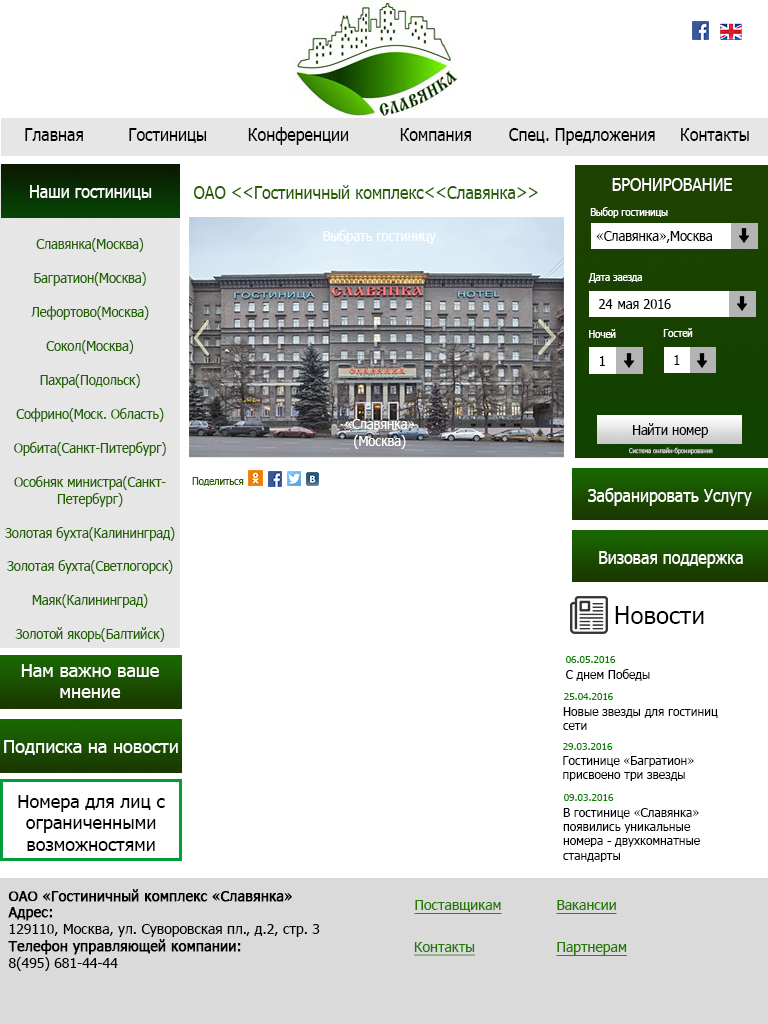
<style>
.page{position:relative;width:768px;height:1024px;background:#ffffff}
.page>*{position:absolute;margin:0}
.t1{font:17.7px "Tahoma";color:#000000;scale:0.9 1}
.t2{font:17.7px "Tahoma";color:#fefefe;scale:0.9 1}
.t3{font:17.7px "Tahoma";color:#266000;scale:0.9 1}
.t4{font:17.7px "Tahoma";color:#ffffff;scale:0.9 1}
.t5{font:10.6px "Tahoma";color:#ffffff;scale:0.9 1}
.t6{font:14.1px "Tahoma";color:#ffffff;scale:0.9 1}
.t7{font:14.1px "Tahoma";color:#000000;scale:0.9 1}
.t8{font:14.1px "Tahoma";color:#236301;scale:0.9 1}
.t9{font:6.5px "Tahoma";color:#c7c5c5;scale:0.9 1}
.t10{font:10.6px "Tahoma";color:#266000;scale:0.9 1}
.t11{font:24px "Tahoma";color:#000000}
.t12{font:18px "Tahoma";color:#ffffff}
.t13{font:10px "Tahoma";color:#0c8100}
.t14{font:12px "Tahoma";color:#000000}
.t15{font:18px "Tahoma";color:#000000}
.t16{font:14px "Tahoma";color:#000000}
.t17{font:14px "Tahoma";color:#000000;font-weight:bold}
.t18{font:14px "Tahoma";color:#227a00;text-decoration:underline}
</style>
<div class="page">
<p class="t1" style="left:25px;top:128px;width:58px;height:13px">Главная</p>
<p class="t1" style="left:129px;top:128px;width:78px;height:15px">Гостиницы</p>
<p class="t1" style="left:248px;top:127px;width:101px;height:18px">Конференции</p>
<p class="t1" style="left:400px;top:128px;width:71px;height:13px">Компания</p>
<p class="t1" style="left:509px;top:128px;width:146px;height:17px">Спец. Предложения</p>
<p class="t1" style="left:681px;top:128px;width:68px;height:13px">Контакты</p>
<p class="t2" style="left:30px;top:185px;width:122px;height:15px">Наши гостиницы</p>
<p class="t3" style="left:193px;top:185px;width:345px;height:14px">ОАО &lt;&lt;Гостиничный комплекс&lt;&lt;Славянка&gt;&gt;</p>
<p class="t4" style="left:612px;top:178px;width:120px;height:13px">БРОНИРОВАНИЕ</p>
<p class="t5" style="left:590px;top:207px;width:78px;height:11px">Выбор гостиницы</p>
<p class="t6" style="left:323px;top:230px;width:113px;height:14px">Выбрать гостиницу</p>
<p class="t7" style="left:596px;top:231px;width:116px;height:12px">«Славянка»,Москва</p>
<p class="t8" style="left:5px;top:238px;width:170px;height:404px;text-align:center">Славянка(Москва)<br><br>Багратион(Москва)<br><br>Лефортово(Москва)<br><br>Сокол(Москва)<br><br>Пахра(Подольск)<br><br>Софрино(Моск. Область)<br><br>Орбита(Санкт-Питербург)<br><br>Особняк министра(Санкт-<br>Петербург)<br><br>Золотая бухта(Калининград)<br><br>Золотая бухта(Светлогорск)<br><br>Маяк(Калининград)<br><br>Золотой якорь(Балтийск)</p>
<p class="t5" style="left:588px;top:273px;width:54px;height:10px">Дата заезда</p>
<p class="t7" style="left:599px;top:299px;width:72px;height:10px">24  мая 2016</p>
<p class="t5" style="left:589px;top:329px;width:27px;height:9px">Ночей</p>
<p class="t5" style="left:663px;top:328px;width:30px;height:9px">Гостей</p>
<p class="t7" style="left:600px;top:356px;width:5px;height:10px">1</p>
<p class="t7" style="left:674px;top:355px;width:6px;height:10px">1</p>
<p class="t6" style="left:345px;top:419px;width:70px;height:30px;text-align:center">«Славянка»<br>(Москва)</p>
<p class="t7" style="left:633px;top:423px;width:75px;height:15px">Найти номер</p>
<p class="t9" style="left:629px;top:447px;width:84px;height:8px">Система онлайн-бронирования</p>
<p class="t10" style="left:192px;top:477px;width:52px;height:9px">Поделиться</p>
<p class="t4" style="left:588px;top:488px;width:164px;height:18px">Забранировать Услугу</p>
<p class="t4" style="left:599px;top:551px;width:144px;height:17px">Визовая поддержка</p>
<p class="t11" style="left:615px;top:606px;width:89px;height:18px">Новости</p>
<p class="t12" style="left:21px;top:664px;width:138px;height:34px;text-align:center">Нам важно ваше мнение</p>
<p class="t13" style="left:566px;top:656px;width:50px;height:7px">06.05.2016</p>
<p class="t14" style="left:566px;top:669px;width:84px;height:12px">C днем Победы</p>
<p class="t13" style="left:564px;top:693px;width:49px;height:7px">25.04.2016</p>
<p class="t14" style="left:563px;top:707px;width:155px;height:23px">Новые звезды для гостиниц <br>сети</p>
<p class="t12" style="left:4px;top:740px;width:174px;height:15px">Подписка на новости</p>
<p class="t13" style="left:563px;top:743px;width:50px;height:7px">29.03.2016</p>
<p class="t14" style="left:563px;top:756px;width:131px;height:25px">Гостинице «Багратион»<br>присвоено три звезды</p>
<p class="t15" style="left:18px;top:795px;width:147px;height:56px;text-align:center">Номера для лиц с ограниченными <br>возможностями</p>
<p class="t13" style="left:564px;top:794px;width:50px;height:7px">09.03.2016</p>
<p class="t14" style="left:563px;top:808px;width:137px;height:54px">В гостинице «Славянка»<br>появились уникальные<br>номера - двухкомнатные<br>стандарты</p>
<p class="t16" style="left:8px;top:889px;width:312px;height:82px"><span class="t17">ОАО «Гостиничный комплекс «Славянка»<br>Адрес:<br></span>129110, Москва, ул. Суворовская пл., д.2, стр. 3<br><span class="t17">Телефон управляющей компании:<br></span>8(495) 681-44-44</p>
<p class="t18" style="left:414px;top:900px;width:88px;height:14px">Поставщикам</p>
<p class="t18" style="left:556px;top:900px;width:61px;height:14px">Вакансии</p>
<p class="t18" style="left:414px;top:942px;width:62px;height:14px">Контакты</p>
<p class="t18" style="left:556px;top:942px;width:71px;height:14px">Партнерам</p>
</div>
